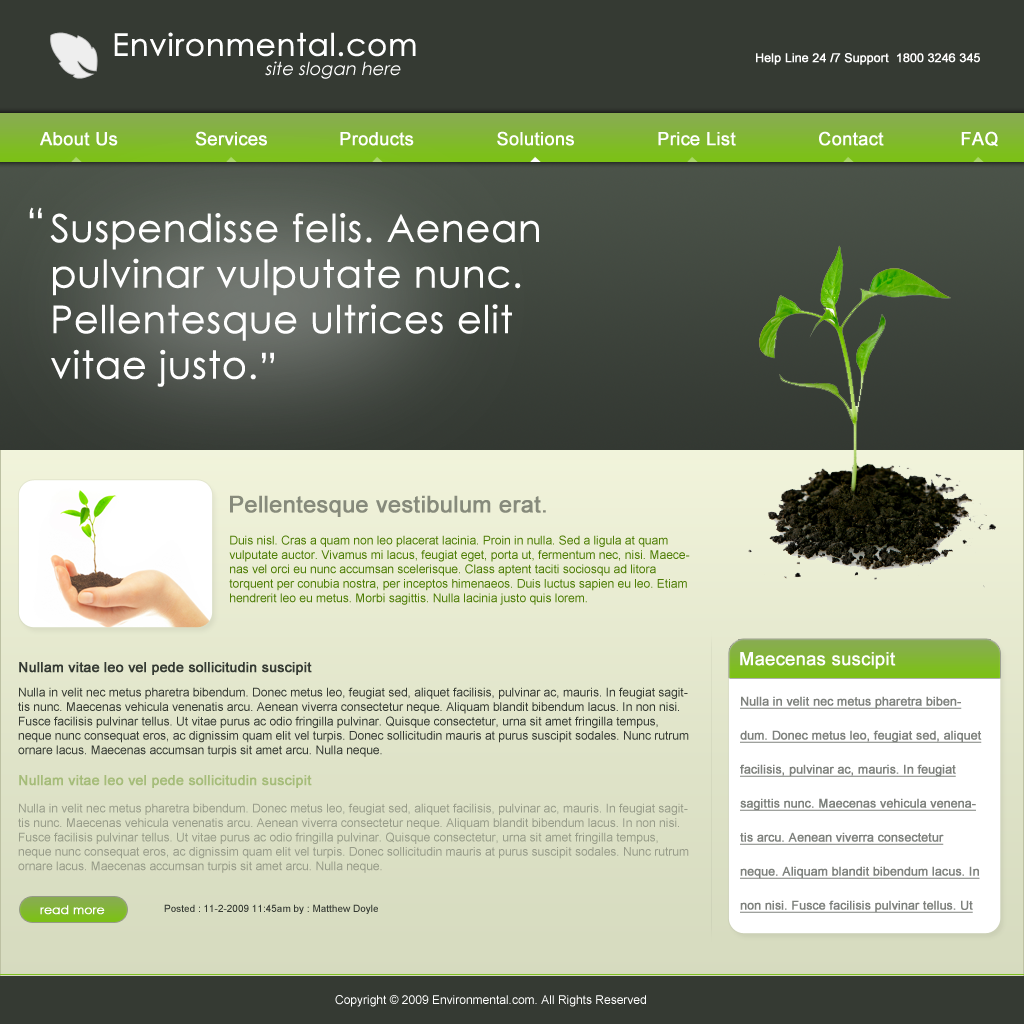
<style>
.page{position:relative;width:1024px;height:1024px}
.page>*{position:absolute;margin:0}
.t1{font:31px "CenturyGothic";color:#ffffff;font-weight:bold}
.t2{font:12px "ArialMT";color:#ffffff;font-weight:bold}
.t3{font:18px "CenturyGothic";color:#ffffff;font-style:italic}
.t4{font:18px "ArialMT";color:#ffffff;font-weight:bold}
.t5{font:38px "CenturyGothic";color:#ffffff;font-weight:bold}
.t6{font:23px "ArialMT";color:#868a7b;font-weight:bold}
.t7{font:12px "ArialMT";color:#4e7d05}
.t8{font:14px "ArialMT";color:#353a33;font-weight:bold}
.t9{font:12px "ArialMT";color:#353a33}
.t10{font:12px/34px "ArialMT";color:#7e817d;font-weight:bold;text-decoration:underline}
.t11{font:14px "ArialMT";color:#a5bc79;font-weight:bold}
.t12{font:12px "ArialMT";color:#979c89}
.t13{font:12px "CenturyGothic";color:#ffffff;font-weight:bold}
.t14{font:10px "ArialMT";color:#353a33}
.t15{font:12px "ArialMT";color:#ffffff}
</style>
<div class="page">
<p class="t1" style="left:114px;top:32px;width:302px;height:25px">Environmental.com</p>
<p class="t2" style="left:756px;top:53px;width:224px;height:12px">Help Line 24 /7 Support  1800 3246 345</p>
<p class="t3" style="left:265px;top:61px;width:136px;height:18px">site slogan here</p>
<p class="t4" style="left:40px;top:131px;width:958px;height:16px">About Us              Services             Products               Solutions               Price List               Contact              FAQ</p>
<p class="t5" style="left:29px;top:207px;width:13px;height:12px">“</p>
<p class="t5" style="left:50px;top:213px;width:489px;height:174px">Suspendisse felis. Aenean pulvinar vulputate nunc. Pellentesque ultrices elit vitae justo.</p>
<p class="t5" style="left:262px;top:352px;width:12px;height:12px">”</p>
<p class="t6" style="left:230px;top:495px;width:316px;height:22px">Pellentesque vestibulum erat.</p>
<p class="t7" style="left:229px;top:535px;width:461px;height:70px">Duis nisl. Cras a quam non leo placerat lacinia. Proin in nulla. Sed a ligula at quam vulputate auctor. Vivamus mi lacus, feugiat eget, porta ut, fermentum nec, nisi. Maecenas vel orci eu nunc accumsan scelerisque. Class aptent taciti sociosqu ad litora torquent per conubia nostra, per inceptos himenaeos. Duis luctus sapien eu leo. Etiam hendrerit leo eu metus. Morbi sagittis. Nulla lacinia justo quis lorem.</p>
<p class="t4" style="left:740px;top:652px;width:156px;height:17px">Maecenas suscipit</p>
<p class="t8" style="left:19px;top:662px;width:293px;height:13px">Nullam vitae leo vel pede sollicitudin suscipit</p>
<p class="t9" style="left:18px;top:687px;width:671px;height:70px">Nulla in velit nec metus pharetra bibendum. Donec metus leo, feugiat sed, aliquet facilisis, pulvinar ac, mauris. In feugiat sagittis nunc. Maecenas vehicula venenatis arcu. Aenean viverra consectetur neque. Aliquam blandit bibendum lacus. In non nisi. Fusce facilisis pulvinar tellus. Ut vitae purus ac odio fringilla pulvinar. Quisque consectetur, urna sit amet fringilla tempus, neque nunc consequat eros, ac dignissim quam elit vel turpis. Donec sollicitudin mauris at purus suscipit sodales. Nunc rutrum ornare lacus. Maecenas accumsan turpis sit amet arcu. Nulla neque.</p>
<p class="t10" style="left:740px;top:696px;width:242px;height:217px">Nulla in velit nec metus pharetra bibendum. Donec metus leo, feugiat sed, aliquet facilisis, pulvinar ac, mauris. In feugiat sagittis nunc. Maecenas vehicula venenatis arcu. Aenean viverra consectetur neque. Aliquam blandit bibendum lacus. In non nisi. Fusce facilisis pulvinar tellus. Ut vitae purus ac odio fringilla pulvinar.</p>
<p class="t11" style="left:19px;top:775px;width:293px;height:13px">Nullam vitae leo vel pede sollicitudin suscipit</p>
<p class="t12" style="left:18px;top:803px;width:671px;height:70px">Nulla in velit nec metus pharetra bibendum. Donec metus leo, feugiat sed, aliquet facilisis, pulvinar ac, mauris. In feugiat sagittis nunc. Maecenas vehicula venenatis arcu. Aenean viverra consectetur neque. Aliquam blandit bibendum lacus. In non nisi. Fusce facilisis pulvinar tellus. Ut vitae purus ac odio fringilla pulvinar. Quisque consectetur, urna sit amet fringilla tempus, neque nunc consequat eros, ac dignissim quam elit vel turpis. Donec sollicitudin mauris at purus suscipit sodales. Nunc rutrum ornare lacus. Maecenas accumsan turpis sit amet arcu. Nulla neque.</p>
<p class="t13" style="left:40px;top:905px;width:65px;height:10px">read more</p>
<p class="t14" style="left:164px;top:904px;width:214px;height:10px">Posted : 11-2-2009 11:45am by : Matthew Doyle</p>
<p class="t15" style="left:335px;top:995px;width:311px;height:12px">Copyright © 2009 Environmental.com. All Rights Reserved</p>
</div>
